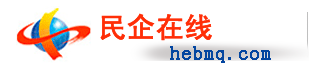
<style>
.page{position:relative;width:309px;height:70px;background:#ffffff}
.page>*{position:absolute;margin:0}
.t1{font:28.1px "SimHei";color:#ff2e07;font-weight:bold}
.t2{font:20.1px "SimSun";color:#0446a0;font-weight:bold}
</style>
<div class="page">
<p class="t1" style="left:100px;top:13px;width:112px;height:28px">民企在线</p>
<p class="t2" style="left:170px;top:46px;width:101px;height:17px">hebmq.com</p>
</div>
